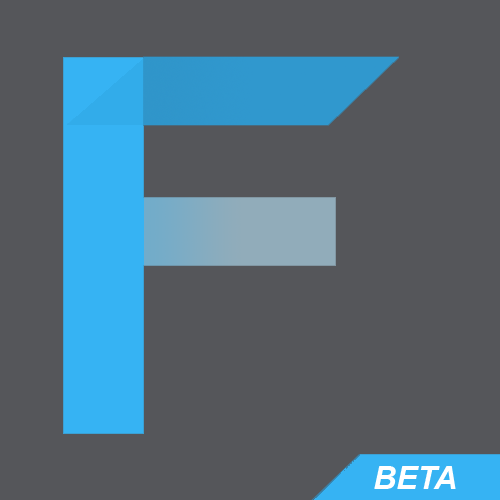
<style>
.page{position:relative;width:500px;height:500px;background:#55565a}
.page>*{position:absolute;margin:0}
.t1{font:32px "Arial-BoldItalicMT";color:#ffffff}
.t2{font:454.7px "ArialMT";color:#ffffff}
</style>
<div class="page">
<p class="t1" style="left:374px;top:466px;width:82px;height:23px">BETA <br><span class="t2">jj</span></p>
</div>
